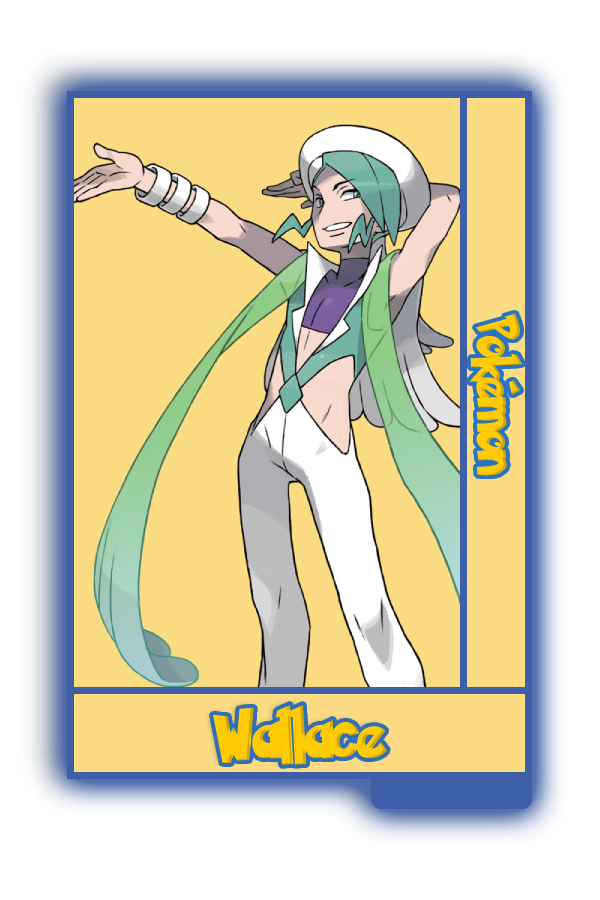
<style>
.page{position:relative;width:600px;height:900px;background:#fbdc83}
.page>*{position:absolute;margin:0}
.t1{font:48.8px "PokemonSolidNormal";color:#ffcb05;scale:0.8 1}
.t2{font:56.6px "PokemonSolidNormal";color:#ffcb05;scale:0.92 1}
</style>
<div class="page">
<p class="t1" style="left:469px;top:313px;width:54px;height:163px;rotate:90deg">Pokémon</p>
<p class="t2" style="left:212px;top:704px;width:175px;height:61px">Wallace</p>
</div>
